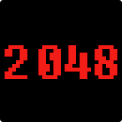
<style>
.page{position:relative;width:122px;height:122px;background:#000000}
.page>*{position:absolute;margin:0}
.t1{font:48px "Fixedsys";color:#f31d18}
</style>
<div class="page">
<p class="t1" style="left:4px;top:45px;width:114px;height:34px">2048</p>
</div>
